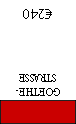
<style>
.page{position:relative;width:76px;height:124px;background:#ffffff}
.page>*{position:absolute;margin:0}
.t1{font:14px "MyriadPro-Regular";color:#000000}
.t2{font:12px "AdobeDevanagari-Regular";color:#000000;scale:0.9 1}
</style>
<div class="page">
<p class="t1" style="left:23px;top:9px;width:29px;height:10px;rotate:180deg">€240</p>
<p class="t2" style="left:16px;top:74px;width:44px;height:22px;text-align:center;rotate:180deg">GOETHE-<br>STRASSE</p>
</div>
